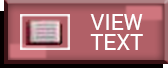
<style>
.page{position:relative;width:168px;height:68px;background:#b16067}
.page>*{position:absolute;margin:0}
.t1{font:22px/20px "Roboto-Regular";color:#ffffff}
</style>
<div class="page">
<p class="t1" style="left:90px;top:14px;width:53px;height:36px;text-align:center">VIEW<br>TEXT</p>
</div>
